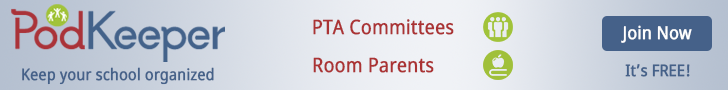
<style>
.page{position:relative;width:728px;height:90px}
.page>*{position:absolute;margin:0}
.t1{font:20px "NotoSans";color:#ab3334;font-weight:bold;scale:0.88 1}
.t2{font:18px "NotoSans";color:#ffffff;font-weight:bold;scale:0.88 1}
.t3{font:16px "NotoSans";color:#456189;font-weight:bold;scale:0.88 1}
</style>
<div class="page">
<p class="t1" style="left:313px;top:19px;width:141px;height:16px">PTA Committees</p>
<p class="t2" style="left:621px;top:25px;width:71px;height:18px">Join Now</p>
<p class="t1" style="left:313px;top:57px;width:121px;height:16px">Room Parents</p>
<p class="t3" style="left:625px;top:64px;width:65px;height:13px">It’s FREE!</p>
<p class="t3" style="left:22px;top:67px;width:192px;height:18px">Keep your school organized</p>
</div>
